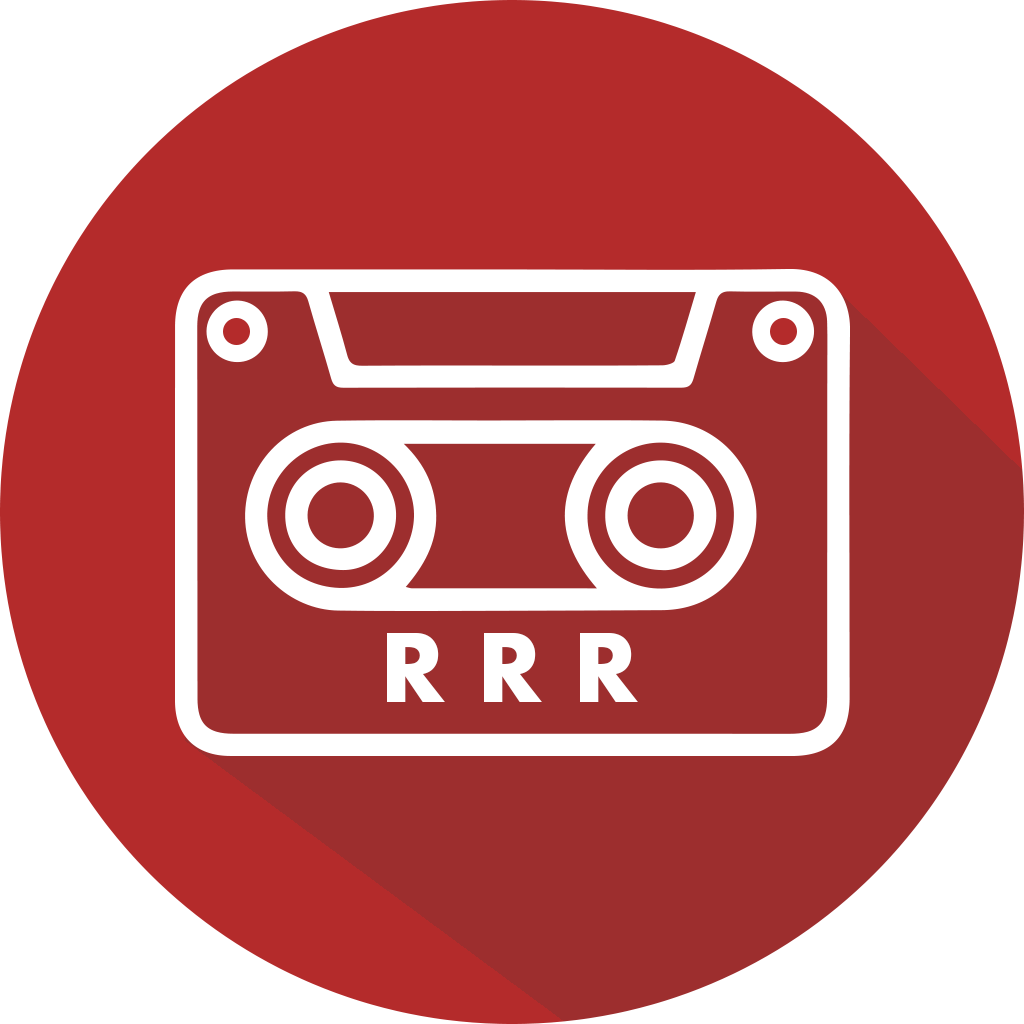
<style>
.page{position:relative;width:1024px;height:1024px;background:#9d2e2e}
.page>*{position:absolute;margin:0}
.t1{font:103.9px "Aharoni-Bold";letter-spacing:0.3em;color:#ffffff}
</style>
<div class="page">
<p class="t1" style="left:387px;top:633px;width:251px;height:69px">RRR</p>
</div>
